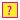
<style>
.page{position:relative;width:20px;height:20px;background:#fff224}
.page>*{position:absolute;margin:0}
.t1{font:12px "AdobeHeitiStd-Regular";color:#ff009c}
</style>
<div class="page">
<p class="t1" style="left:7px;top:5px;width:5px;height:10px">?</p>
</div>
